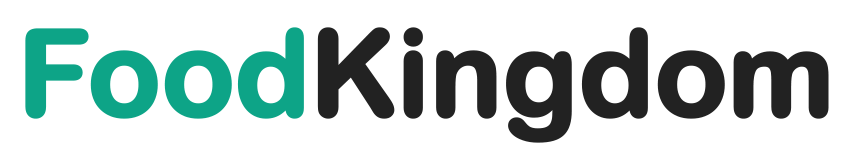
<style>
.page{position:relative;width:841px;height:150px;background:#ffffff}
.page>*{position:absolute;margin:0}
.t1{font:120px "ArialRoundedMTBold";color:#222222;font-weight:bold}
.t2{font:120px "ArialRoundedMTBold";color:#0da487;font-weight:bold}
</style>
<div class="page">
<p class="t1" style="left:25px;top:27px;width:804px;height:116px"><span class="t2">Food</span>Kingdom</p>
</div>
